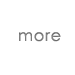
<style>
.page{position:relative;width:75px;height:75px;background:#ffffff}
.page>*{position:absolute;margin:0}
.t1{font:16px "CenturyGothic";letter-spacing:0.05em;color:#7b7b7b}
</style>
<div class="page">
<p class="t1" style="left:19px;top:32px;width:42px;height:10px">more</p>
</div>
